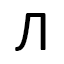
<style>
.page{position:relative;width:64px;height:64px;background:#ffffff}
.page>*{position:absolute;margin:0}
.t1{font:58.3px "Calibri";color:#000000}
</style>
<div class="page">
<p class="t1" style="left:15px;top:13px;width:31px;height:38px">Л</p>
</div>
